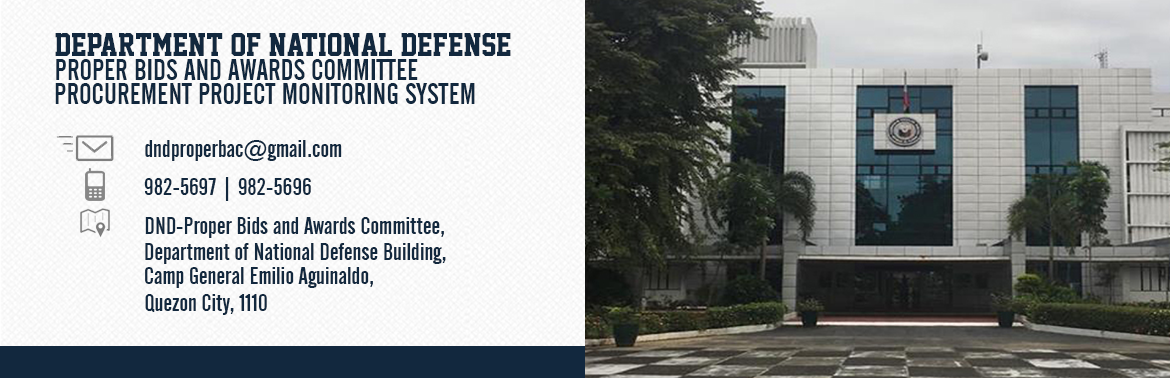
<style>
.page{position:relative;width:1170px;height:378px}
.page>*{position:absolute;margin:0}
.t1{font:30px "AcademicM54";color:#12283e}
.t2{font:30px "AlternateGothicNo2BT-Regular";color:#12283e}
.t3{font:24px "AlternateGothicNo2BT-Regular";color:#12283e}
.t4{font:24px "AlternateGothicNo2BT-Regular";color:#193755}
</style>
<div class="page">
<p class="t1" style="left:55px;top:33px;width:456px;height:23px">DEPARTMENT OF NATIONAL DEFENSE</p>
<p class="t2" style="left:56px;top:59px;width:362px;height:21px">PROPER BIDS AND AWARDS COMMITTEE</p>
<p class="t2" style="left:55px;top:83px;width:420px;height:21px">PROCUREMENT PROJECT MONITORING SYSTEM</p>
<p class="t3" style="left:145px;top:140px;width:197px;height:21px">dndproperbac@gmail.com</p>
<p class="t3" style="left:144px;top:177px;width:167px;height:24px">982-5697 | 982-5696</p>
<p class="t4" style="left:145px;top:217px;width:299px;height:21px">DND-Proper Bids and Awards Committee,</p>
<p class="t4" style="left:145px;top:243px;width:301px;height:21px">Department of National Defense Building,</p>
<p class="t4" style="left:145px;top:267px;width:228px;height:21px">Camp General Emilio Aguinaldo,</p>
<p class="t4" style="left:145px;top:294px;width:122px;height:21px">Quezon City, 1110</p>
</div>
